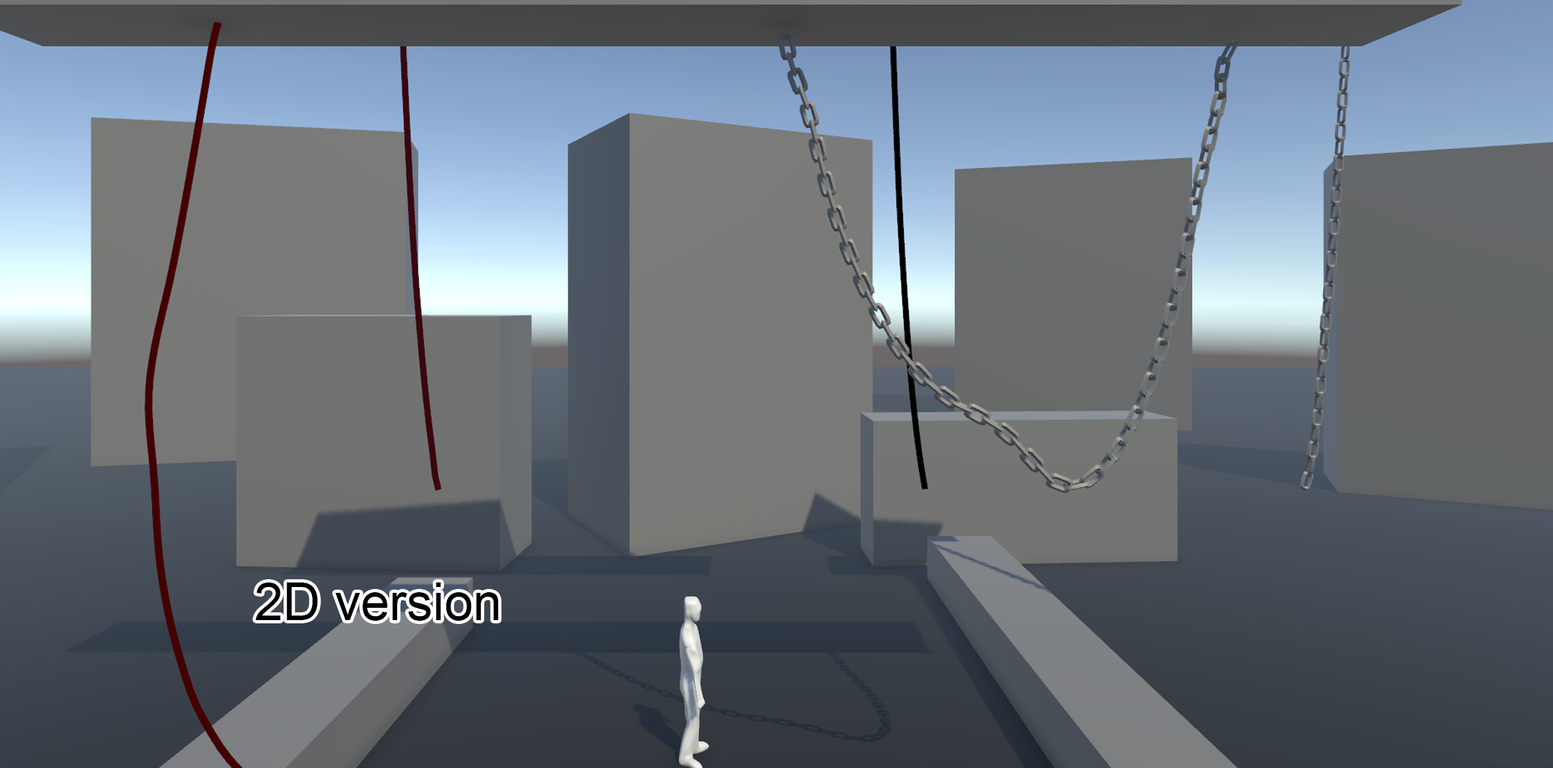
<style>
.page{position:relative;width:1553px;height:768px}
.page>*{position:absolute;margin:0}
.t1{font:51.9px "ArialMT";color:#000000}
</style>
<div class="page">
<p class="t1" style="left:256px;top:582px;width:242px;height:39px">2D version</p>
</div>
